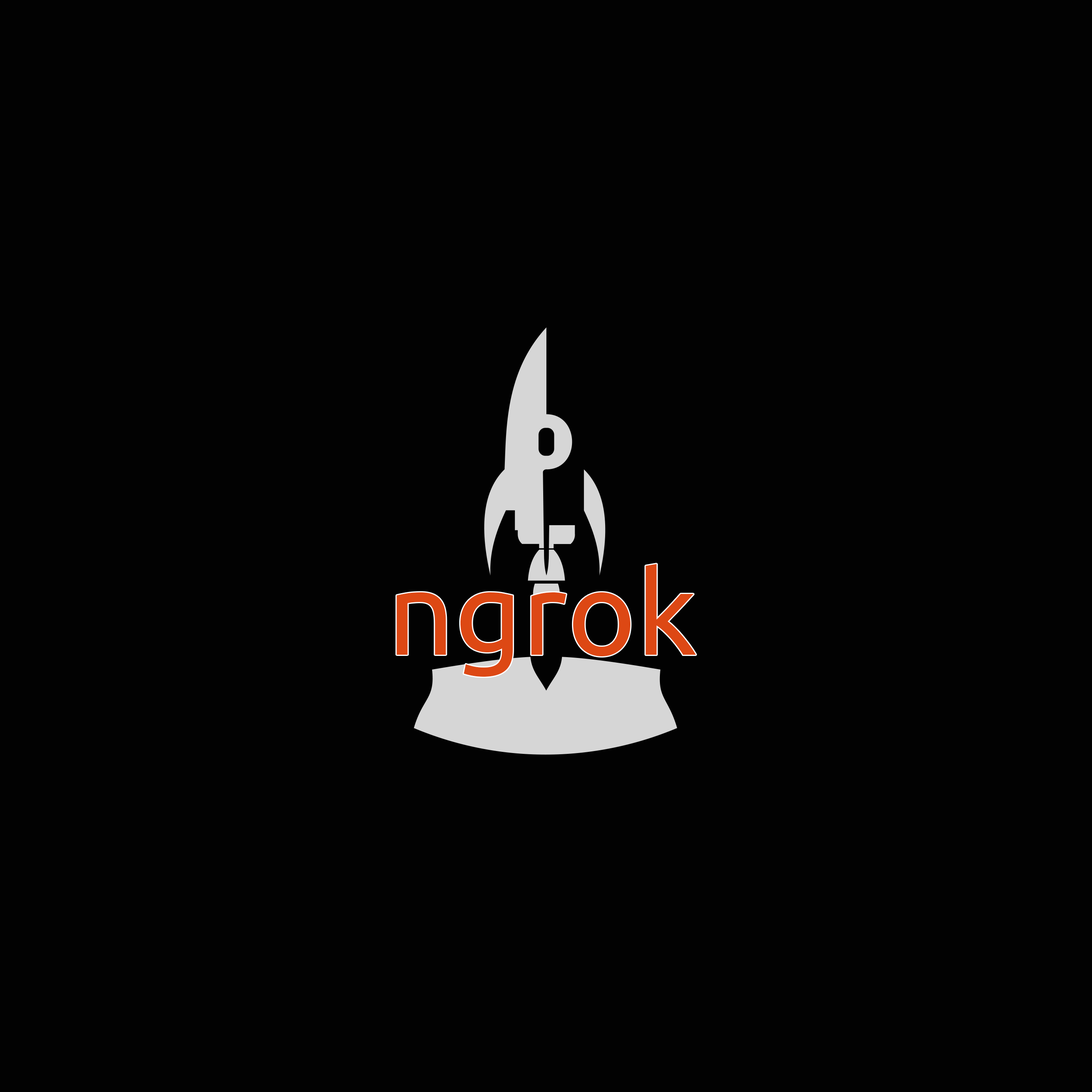
<style>
.page{position:relative;width:1092px;height:1092px;background:#020202}
.page>*{position:absolute;margin:0}
.t1{font:117.1px "Ubuntu";color:#dd4814}
</style>
<div class="page">
<p class="t1" style="left:397px;top:564px;width:299px;height:113px">ngrok</p>
</div>
